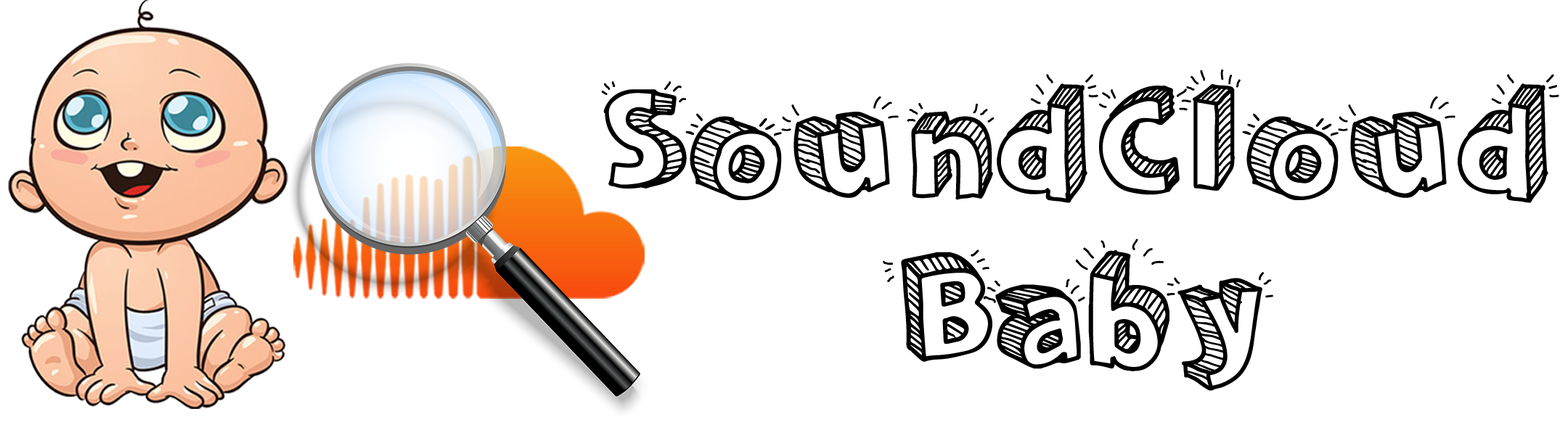
<style>
.page{position:relative;width:1568px;height:438px;background:#ffffff}
.page>*{position:absolute;margin:0}
.t1{font:149.8px/169.6px "Sketch3D";color:#000000}
</style>
<div class="page">
<p class="t1" style="left:601px;top:69px;width:958px;height:322px;text-align:center">SoundCloud<br>Baby</p>
</div>
